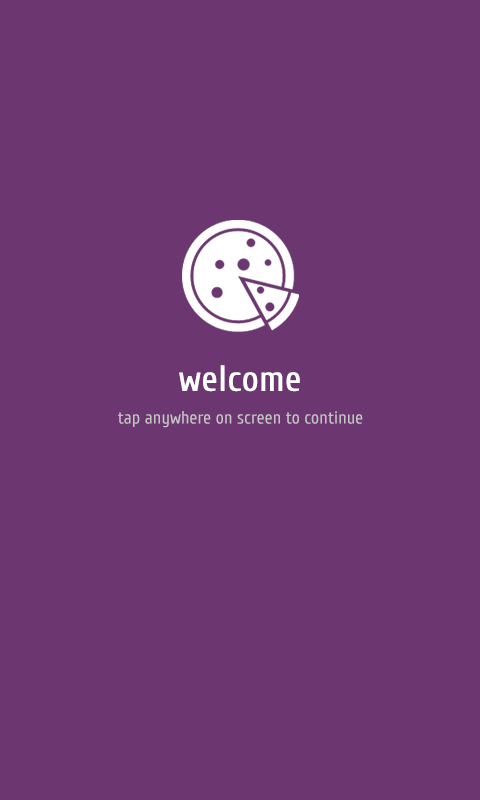
<style>
.page{position:relative;width:480px;height:800px;background:#6c3670}
.page>*{position:absolute;margin:0}
.t1{font:36px "Cuprum-Regular";color:#ffffff;font-weight:bold}
.t2{font:18px "Cuprum-Regular";color:#c4c4c4}
</style>
<div class="page">
<p class="t1" style="left:179px;top:365px;width:121px;height:27px">welcome</p>
<p class="t2" style="left:118px;top:411px;width:245px;height:17px">tap anywhere on screen to continue</p>
</div>
